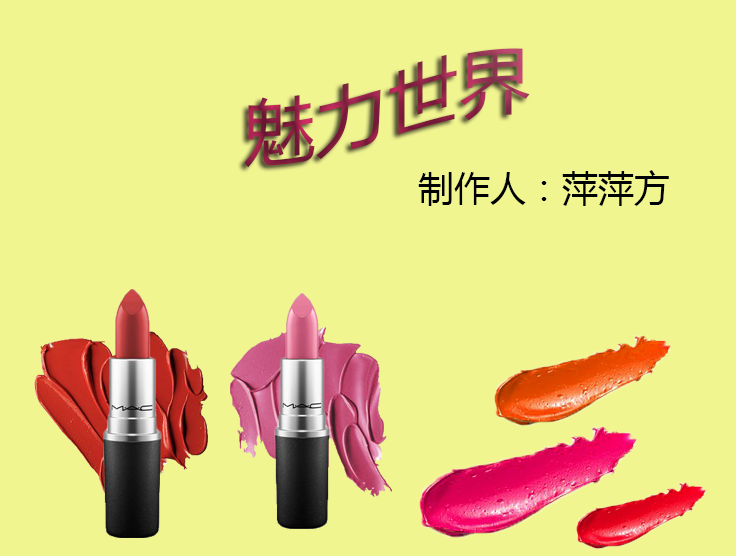
<style>
.page{position:relative;width:736px;height:556px;background:#f1f590}
.page>*{position:absolute;margin:0}
.t1{font:72px "MicrosoftYaHeiUI"}
.t2{font:36px "MicrosoftYaHeiUI";color:#000102}
</style>
<div class="page">
<p class="t1" style="left:244px;top:48px;width:286px;height:120px">魅力世界</p>
<p class="t2" style="left:418px;top:170px;width:251px;height:36px">制作人：萍萍方</p>
</div>
